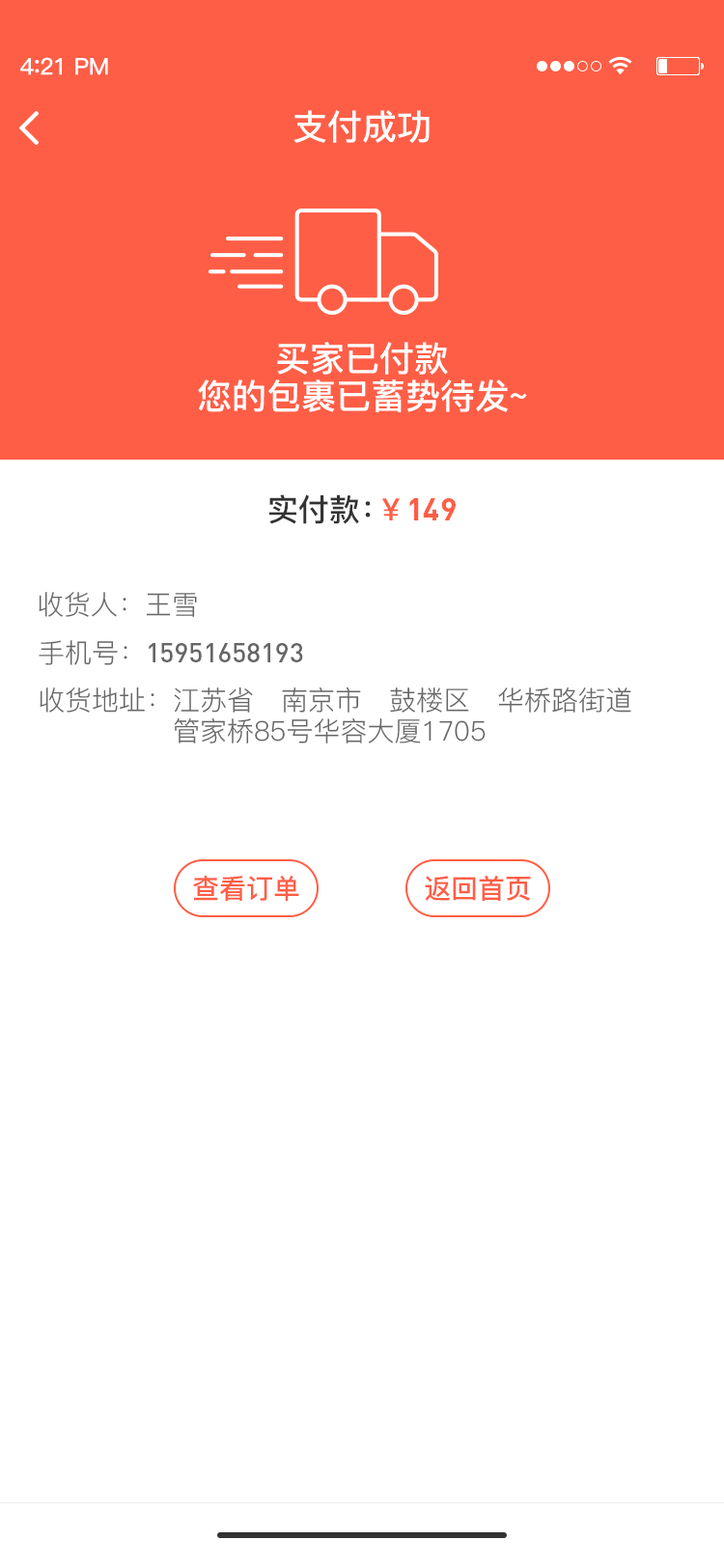
<style>
.page{position:relative;width:724px;height:1568px;background:#ffffff}
.page>*{position:absolute;margin:0}
.t1{font:23.2px "PingFang-SC-Bold";letter-spacing:-0.02em;color:#fefefe}
.t2{font:25.1px "PingFang-SC-Bold";letter-spacing:-0.02em;color:#fefefe}
.t3{font:34.8px "PingFang-SC-Bold";color:#ffffff}
.t4{font:30.9px "PingFang-SC-Bold";color:#333333}
.t5{font:30.9px "DIN-Bold";color:#ff5e46}
.t6{font:30.9px "PingFang-SC-Bold";color:#ff5e46}
.t7{font:27px "PingFang-SC-Regular";color:#666666}
.t8{font:27px "DIN-Medium";color:#666666}
.t9{font:27px/34.8px "PingFang-SC-Regular";color:#666666}
.t10{font:27px "PingFang-SC-Bold";color:#ff5e46}
</style>
<div class="page">
<p class="t1" style="left:20px;top:57px;width:88px;height:18px">4<span class="t2">:</span>21 PM</p>
<p class="t3" style="left:294px;top:110px;width:136px;height:33px">支付成功</p>
<p class="t3" style="left:198px;top:342px;width:329px;height:70px;text-align:center">买家已付款<br>您的包裹已蓄势待发~</p>
<p class="t4" style="left:269px;top:494px;width:102px;height:30px">实付款：</p>
<p class="t5" style="left:382px;top:498px;width:74px;height:22px"><span class="t6">￥</span>149</p>
<p class="t7" style="left:39px;top:592px;width:158px;height:25px">收货人：王雪</p>
<p class="t8" style="left:39px;top:640px;width:264px;height:25px"><span class="t7">手机号：</span>15951658193</p>
<p class="t9" style="left:40px;top:686px;width:591px;height:57px">收货地址：江苏省   南京市   鼓楼区   华桥路街道   <br>               管家桥85号华容大厦1705</p>
<p class="t10" style="left:193px;top:875px;width:106px;height:26px">查看订单</p>
<p class="t10" style="left:425px;top:875px;width:106px;height:26px">返回首页</p>
</div>
